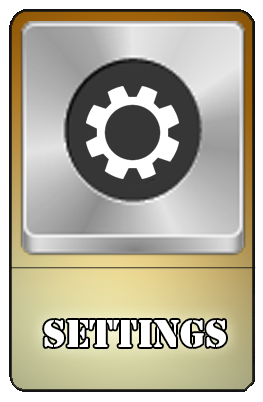
<style>
.page{position:relative;width:263px;height:402px}
.page>*{position:absolute;margin:0}
.t1{font:36px "StencilStd";color:#ffffff}
</style>
<div class="page">
<p class="t1" style="left:44px;top:320px;width:182px;height:27px">SETTINGS</p>
</div>
